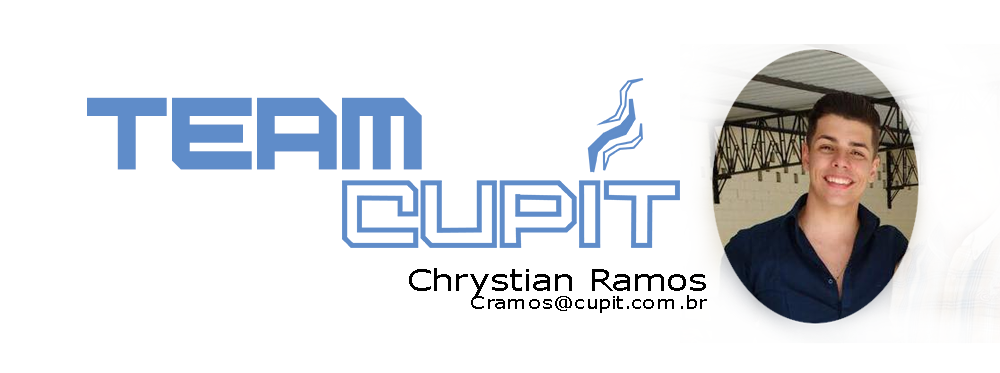
<style>
.page{position:relative;width:1000px;height:373px;background:#ffffff}
.page>*{position:absolute;margin:0}
.t1{font:71.3px "Digital-Desolation";letter-spacing:-0.05em;color:#5f8cc9}
.t2{font:18px/18px "Verdana";color:#000000;scale:1.19 1}
.t3{font:30px/18px "Verdana";color:#000000;scale:1.19 1}
</style>
<div class="page">
<p class="t1" style="left:87px;top:97px;width:335px;height:73px">Team</p>
<p class="t2" style="left:409px;top:268px;width:298px;height:45px;text-align:right"><span class="t3">Chrystian Ramos<br></span>Cramos@cupit.com.br</p>
</div>
